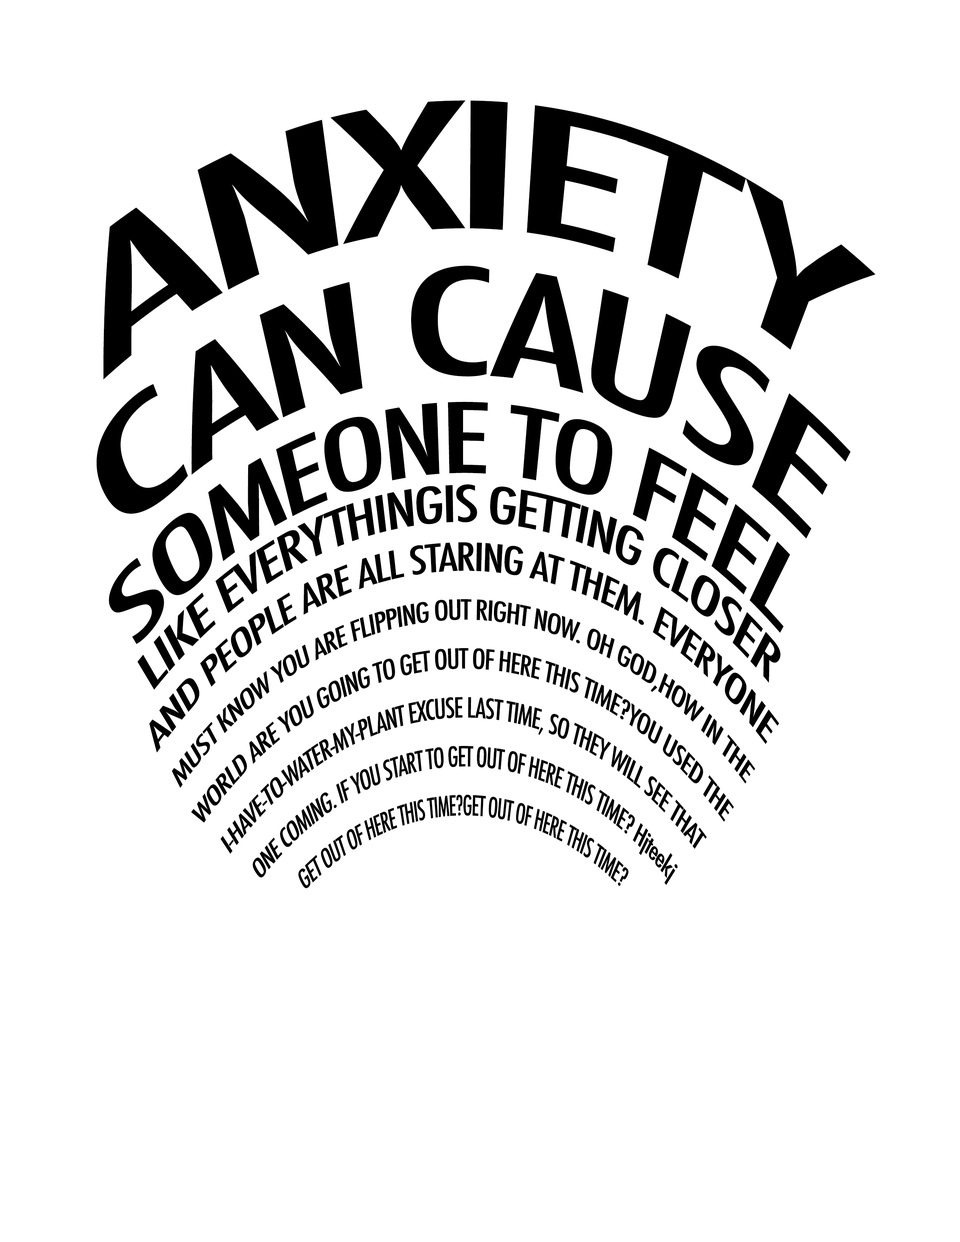
<style>
.page{position:relative;width:960px;height:1242px;background:#ffffff}
.page>*{position:absolute;margin:0}
.t1{font:27.1px/45.2px "Futura-CondensedMedium";letter-spacing:-0.041em;color:#000000;scale:0.69 1}
.t2{font:169.4px/45.2px "Futura-CondensedMedium";letter-spacing:-0.041em;color:#000000;scale:0.69 1}
.t3{font:143px/45.2px "Futura-CondensedMedium";letter-spacing:-0.041em;color:#000000;scale:0.69 1}
.t4{font:94.1px/45.2px "Futura-CondensedMedium";letter-spacing:-0.041em;color:#000000;scale:0.69 1}
.t5{font:48.9px/45.2px "Futura-CondensedMedium";letter-spacing:-0.041em;color:#000000;scale:0.69 1}
.t6{font:37.6px/45.2px "Futura-CondensedMedium";letter-spacing:-0.041em;color:#000000;scale:0.69 1}
</style>
<div class="page">
<p class="t1" style="left:96px;top:101px;width:780px;height:787px;text-align:center"><span class="t2">ANXIETY<br><br><br></span><span class="t3">CAN CAUSE<br> <br></span><span class="t4">SOMEONE TO FEEL <br></span><span class="t5">LIKE EVERYTHINGIS GETTING CLOSER <br></span><span class="t6">AND PEOPLE ARE ALL STARING AT THEM. EVERYONE <br></span>MUST KNOW YOU ARE FLIPPING OUT RIGHT NOW. OH GOD,HOW IN THE <br>WORLD ARE YOU GOING TO GET OUT OF HERE THIS TIME?YOU USED THE <br>I-HAVE-TO-WATER-MY-PLANT EXCUSE LAST TIME, SO THEY WILL SEE THAT <br>ONE COMING. IF YOU START TO GET OUT OF HERE THIS TIME? Hjteekj<br>GET OUT OF HERE THIS TIME?GET OUT OF HERE THIS TIME?</p>
</div>
